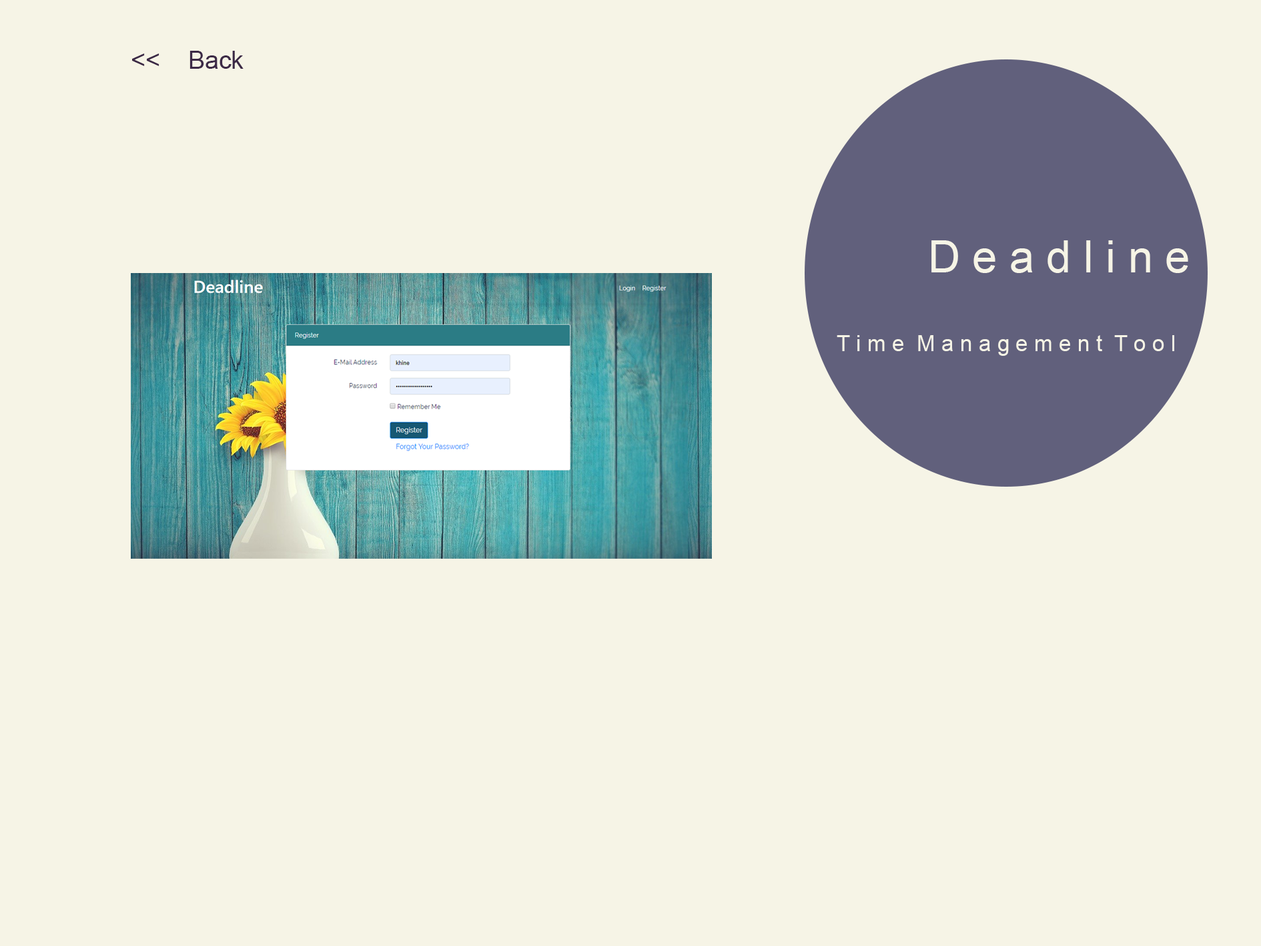
<style>
.page{position:relative;width:1261px;height:946px;background:#f6f4e6}
.page>*{position:absolute;margin:0}
.t1{font:25px "ArialMT";color:#3c2946}
.t2{font:44.5px "ArialMT";color:#f6f4e6}
.t3{font:22.2px "ArialMT";color:#f6f4e6}
</style>
<div class="page">
<p class="t1" style="left:132px;top:51px;width:112px;height:18px">&lt;&lt;    Back</p>
<p class="t2" style="left:932px;top:240px;width:256px;height:33px">D e a d l i n e</p>
<p class="t3" style="left:837px;top:335px;width:337px;height:21px">T i m e  M a n a g e m e n t  T o o l</p>
</div>
